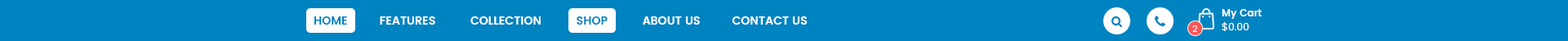
<style>
.page{position:relative;width:1568px;height:41px;background:#0083c1}
.page>*{position:absolute;margin:0}
.t1{font:11.4px "Poppins-SemiBold";color:#ffffff;text-transform:uppercase}
.t2{font:11.4px "Poppins-SemiBold";color:#0083c1;text-transform:uppercase}
.t3{font:9.8px "Poppins-SemiBold";color:#ffffff}
.t4{font:9px "Poppins-Regular";color:#ffffff}
.t5{font:9.8px "Poppins-Regular";color:#ffffff}
</style>
<div class="page">
<p class="t1" style="left:314px;top:16px;width:493px;height:8px"><span class="t2">Home             </span>Features             Collection             <span class="t2">Shop             </span>About Us             Contact Us</p>
<p class="t3" style="left:1222px;top:9px;width:40px;height:10px">My Cart</p>
<p class="t4" style="left:1192px;top:25px;width:5px;height:7px">2</p>
<p class="t5" style="left:1222px;top:22px;width:27px;height:9px">$0.00</p>
</div>
